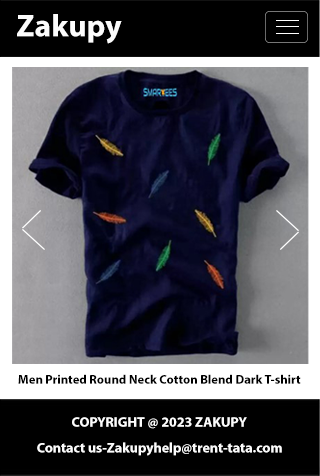
<style>
.page{position:relative;width:320px;height:476px;background:#000000}
.page>*{position:absolute;margin:0}
.t1{font:31.5px "MyriadPro-Bold";color:#fcfcfc}
.t2{font:12.6px "MyriadPro-Bold";color:#000000}
.t3{font:14px "MyriadPro-Bold";color:#fcfcfc}
</style>
<div class="page">
<p class="t1" style="left:17px;top:14px;width:105px;height:30px">Zakupy</p>
<p class="t2" style="left:18px;top:374px;width:283px;height:10px">Men Printed Round Neck Cotton Blend Dark T-shirt</p>
<p class="t3" style="left:72px;top:417px;width:175px;height:12px">COPYRIGHT @ 2023 ZAKUPY</p>
<p class="t3" style="left:37px;top:442px;width:245px;height:14px">Contact us-Zakupyhelp@trent-tata.com</p>
</div>
